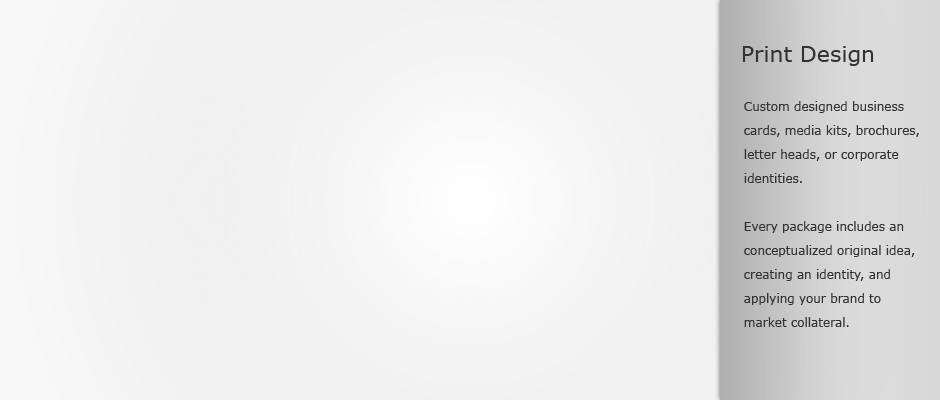
<style>
.page{position:relative;width:940px;height:400px}
.page>*{position:absolute;margin:0}
.t1{font:22px "Verdana";color:#333333}
.t2{font:12px/24px "Verdana";color:#333333}
</style>
<div class="page">
<p class="t1" style="left:742px;top:46px;width:132px;height:20px">Print Design</p>
<p class="t2" style="left:744px;top:101px;width:175px;height:226px">Custom designed business cards, media kits, brochures, letter heads, or corporate identities.<br><br>Every package includes an conceptualized original idea, creating an identity, and applying your brand to market collateral.</p>
</div>
